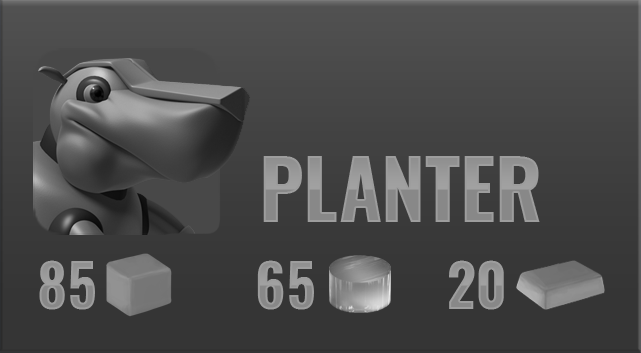
<style>
.page{position:relative;width:641px;height:353px}
.page>*{position:absolute;margin:0}
.t1{font:80px "Oswald-Bold";color:#979797}
.t2{font:57.9px "Oswald-Bold";letter-spacing:-0.005em;color:#9a9a9a}
</style>
<div class="page">
<p class="t1" style="left:263px;top:156px;width:277px;height:66px">PLANTER</p>
<p class="t2" style="left:39px;top:260px;width:465px;height:50px">85           65         20</p>
</div>
